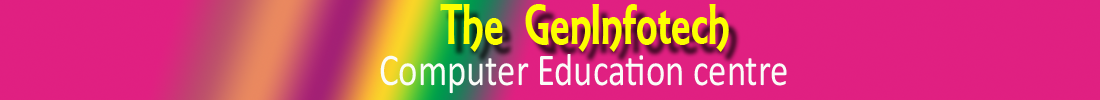
<style>
.page{position:relative;width:1100px;height:100px;background:#e02081}
.page>*{position:absolute;margin:0}
.t1{font:61px "ARESSENCE";color:#fcff00;scale:0.8 1}
.t2{font:45.7px "Calibri";color:#fafcf8;scale:0.8 1}
</style>
<div class="page">
<p class="t1" style="left:440px;top:4px;width:289px;height:48px">The GenInfotech</p>
<p class="t2" style="left:380px;top:54px;width:407px;height:40px">Computer Education centre</p>
</div>
